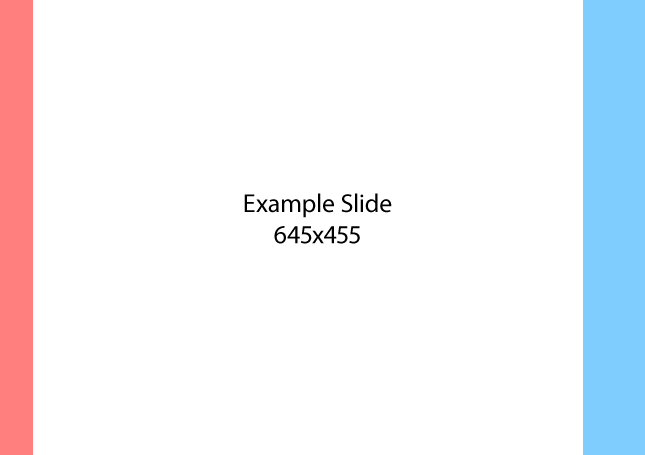
<style>
.page{position:relative;width:645px;height:455px;background:#ffffff}
.page>*{position:absolute;margin:0}
.t1{font:26px "MyriadPro-Regular";color:#000000}
</style>
<div class="page">
<p class="t1" style="left:244px;top:193px;width:148px;height:51px;text-align:center">Example Slide<br>645x455</p>
</div>
